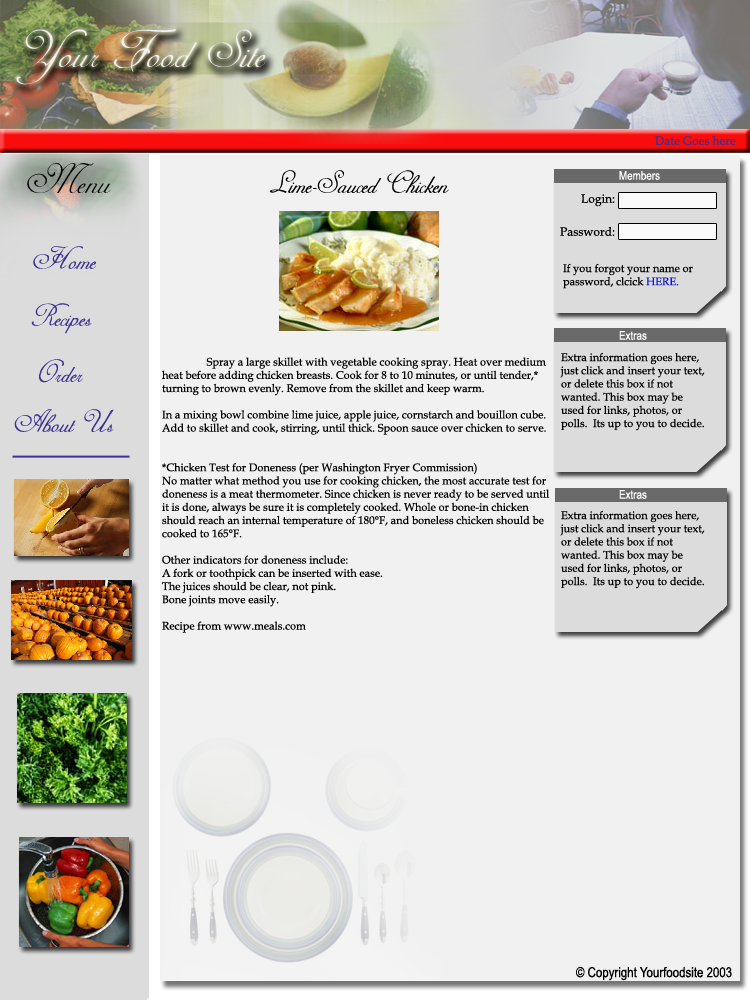
<style>
.page{position:relative;width:750px;height:1000px;background:#f1f1f1}
.page>*{position:absolute;margin:0}
.t1{font:60px "AdineKirnberg-Regular";color:#f1f1f1}
.t2{font:12px "BookAntiqua";color:#3c3190}
.t3{font:48px "AdineKirnberg-Regular";color:#000000}
.t4{font:11px "BookAntiqua";color:#000000}
.t5{font:36px "AdineKirnberg-Regular";color:#000000}
.t6{font:12px "ArialNarrow";color:#ffffff}
.t7{font:12px "BookAntiqua";color:#000000}
.t8{font:36px "AdineKirnberg-Regular";color:#3c3190}
.t9{font:11px "BookAntiqua";color:#1014dc}
.t10{font:14px "ArialNarrow";color:#000000}
</style>
<div class="page">
<p class="t1" style="left:16px;top:29px;width:250px;height:56px">Your Food Site</p>
<p class="t2" style="left:655px;top:135px;width:81px;height:10px">Date Goes here</p>
<p class="t3" style="left:27px;top:163px;width:84px;height:30px">Menu</p>
<p class="t4" style="left:162px;top:170px;width:388px;height:463px;text-align:center"><span class="t5">Lime-Sauced Chicken<br><br><br><br>     </span>Spray a large skillet with vegetable cooking spray. Heat over medium heat before adding chicken breasts. Cook for 8 to 10 minutes, or until tender,* turning to brown evenly. Remove from the skillet and keep warm.<br><br>In a mixing bowl combine lime juice, apple juice, cornstarch and bouillon cube. Add to skillet and cook, stirring, until thick. Spoon sauce over chicken to serve.<br><br><br>*Chicken Test for Doneness (per Washington Fryer Commission)<br>No matter what method you use for cooking chicken, the most accurate test for doneness is a meat thermometer. Since chicken is never ready to be served until it is done, always be sure it is completely cooked. Whole or bone-in chicken should reach an internal temperature of 180°F, and boneless chicken should be cooked to 165°F.<br><br>Other indicators for doneness include:<br>A fork or toothpick can be inserted with ease.<br>The juices should be clear, not pink.<br>Bone joints move easily. <br><br>Recipe from www.meals.com</p>
<p class="t6" style="left:619px;top:171px;width:41px;height:9px">Members</p>
<p class="t7" style="left:581px;top:194px;width:34px;height:13px">Login:</p>
<p class="t7" style="left:560px;top:226px;width:55px;height:10px">Password:</p>
<p class="t8" style="left:33px;top:246px;width:63px;height:23px">Home</p>
<p class="t4" style="left:563px;top:263px;width:130px;height:26px">If you forgot your name or password, clcick <span class="t9">HERE.</span></p>
<p class="t8" style="left:31px;top:303px;width:61px;height:31px">Recipes</p>
<p class="t6" style="left:619px;top:331px;width:28px;height:9px">Extras</p>
<p class="t4" style="left:560px;top:352px;width:145px;height:79px">Extra information goes here, just click and insert your text, or delete this box if not wanted. This box may be used for links, photos, or polls.  Its up to you to decide.</p>
<p class="t8" style="left:39px;top:359px;width:44px;height:24px">Order</p>
<p class="t8" style="left:14px;top:409px;width:100px;height:23px">About Us</p>
<p class="t6" style="left:619px;top:490px;width:28px;height:9px">Extras</p>
<p class="t4" style="left:560px;top:510px;width:145px;height:79px">Extra information goes here, just click and insert your text, or delete this box if not wanted. This box may be used for links, photos, or polls.  Its up to you to decide.</p>
<p class="t10" style="left:576px;top:966px;width:156px;height:15px">© Copyright Yourfoodsite 2003</p>
</div>
